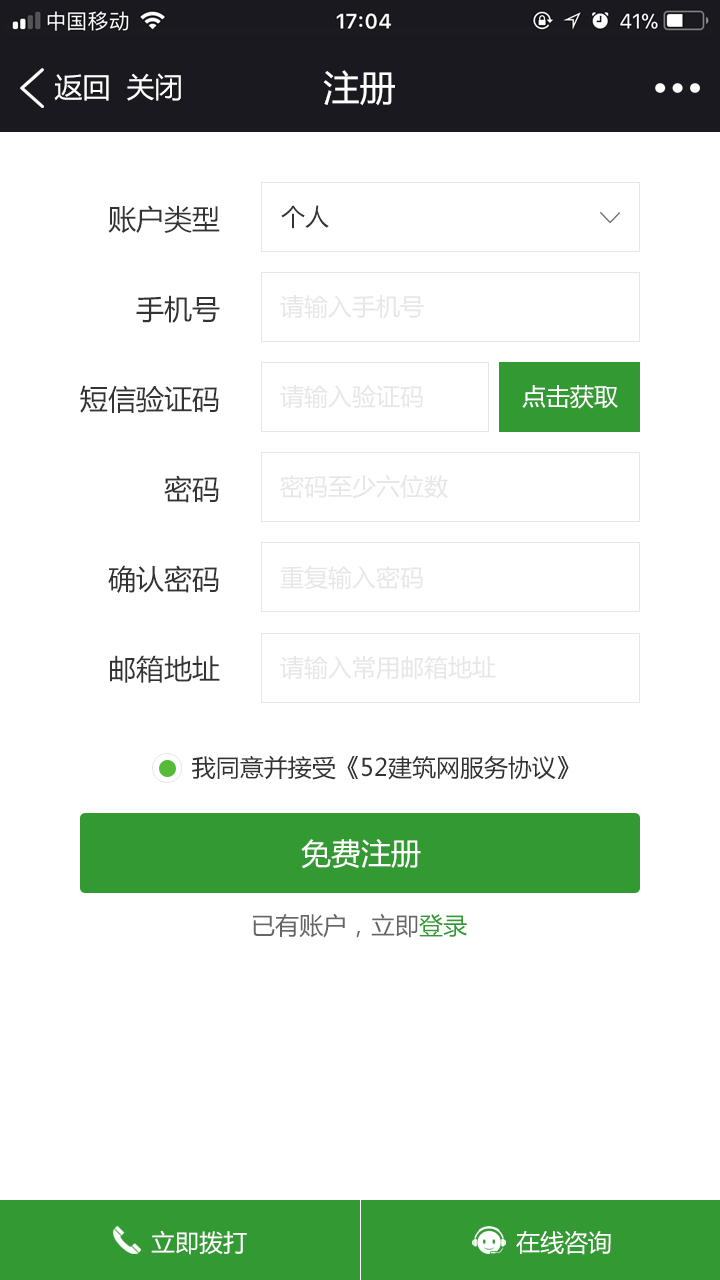
<style>
.page{position:relative;width:720px;height:1280px;background:#ffffff}
.page>*{position:absolute;margin:0}
.t1{font:28px "MicrosoftYaHei";color:#ffffff}
.t2{font:36px "MicrosoftYaHei";color:#ffffff}
.t3{font:28px/90px "MicrosoftYaHei";color:#333333}
.t4{font:24px "MicrosoftYaHei";color:#333333}
.t5{font:24px "MicrosoftYaHei";color:#e7e7e7}
.t6{font:24px "MicrosoftYaHei";color:#ffffff}
.t7{font:30px "MicrosoftYaHei";color:#ffffff}
.t8{font:24px "MicrosoftYaHei";color:#666666}
.t9{font:24px "MicrosoftYaHei";color:#339933}
</style>
<div class="page">
<p class="t1" style="left:54px;top:74px;width:55px;height:27px">返回</p>
<p class="t1" style="left:127px;top:73px;width:54px;height:28px">关闭</p>
<p class="t2" style="left:323px;top:70px;width:72px;height:36px">注册</p>
<p class="t3" style="left:80px;top:205px;width:140px;height:478px;text-align:right">账户类型<br>手机号<br>短信验证码<br>密码<br>确认密码<br>邮箱地址</p>
<p class="t4" style="left:281px;top:205px;width:48px;height:24px">个人</p>
<p class="t5" style="left:280px;top:295px;width:144px;height:24px">请输入手机号</p>
<p class="t5" style="left:280px;top:385px;width:143px;height:24px">请输入验证码</p>
<p class="t6" style="left:522px;top:385px;width:96px;height:24px">点击获取</p>
<p class="t5" style="left:280px;top:475px;width:168px;height:24px">密码至少六位数</p>
<p class="t5" style="left:280px;top:565px;width:143px;height:25px">重复输入密码</p>
<p class="t5" style="left:280px;top:656px;width:216px;height:24px">请输入常用邮箱地址</p>
<p class="t4" style="left:192px;top:755px;width:377px;height:25px">我同意并接受《52建筑网服务协议》</p>
<p class="t7" style="left:301px;top:839px;width:120px;height:30px">免费注册</p>
<p class="t8" style="left:253px;top:913px;width:214px;height:25px">已有账户，立即<span class="t9">登录</span></p>
<p class="t6" style="left:151px;top:1230px;width:96px;height:25px">立即拨打</p>
<p class="t6" style="left:516px;top:1231px;width:95px;height:24px">在线咨询</p>
</div>
